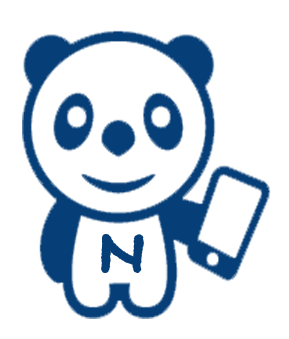
<style>
.page{position:relative;width:289px;height:339px;background:#ffffff}
.page>*{position:absolute;margin:0}
.t1{font:64.8px "BradleyHandITCTT-Bold";color:#063e77}
</style>
<div class="page">
<p class="t1" style="left:103px;top:236px;width:39px;height:35px">N</p>
</div>
